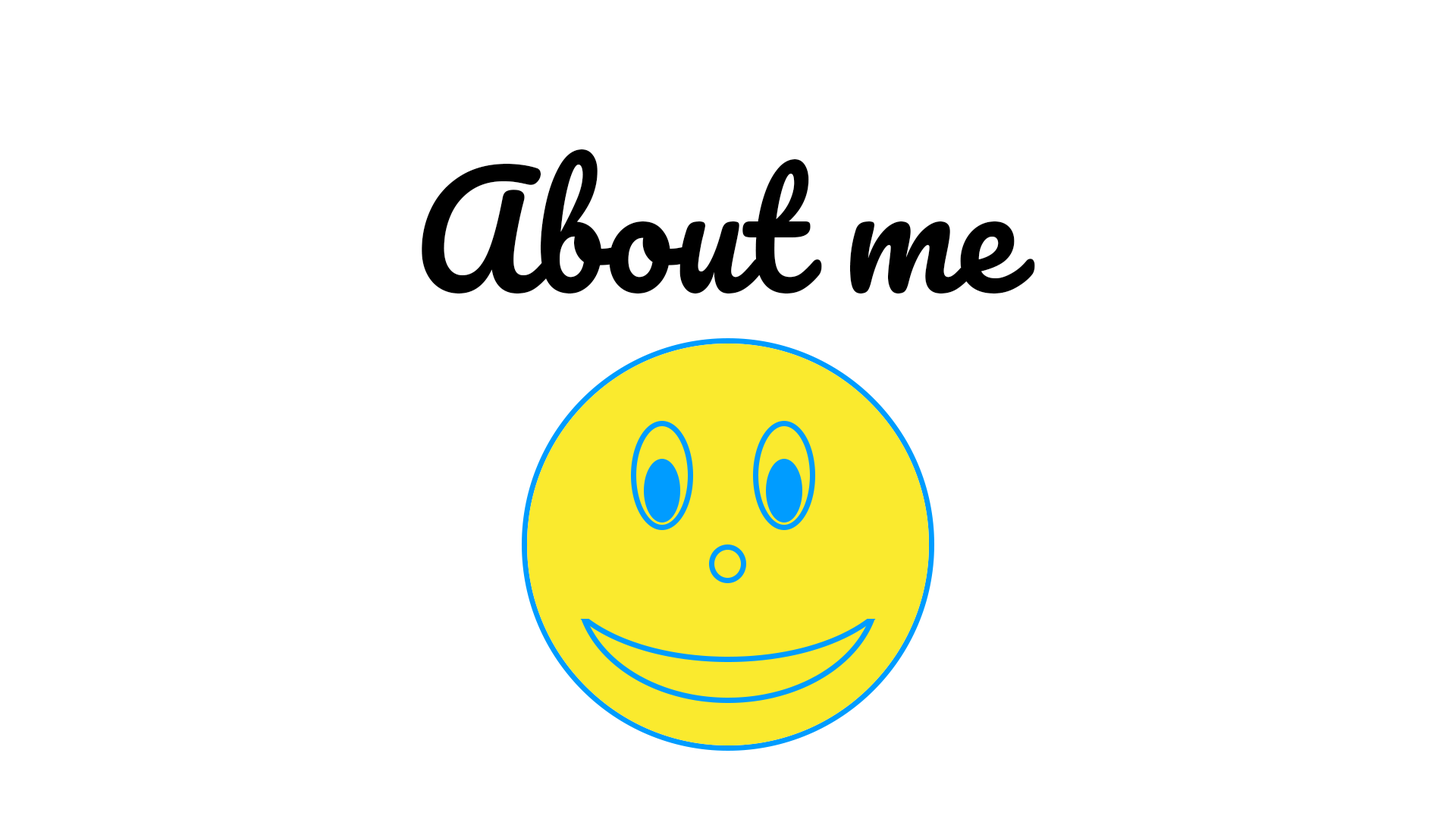
<style>
.page{position:relative;width:1456px;height:819px;background:#ffffff}
.page>*{position:absolute;margin:0}
.t1{font:151.7px "Pacifico-Regular";color:#000000}
</style>
<div class="page">
<p class="t1" style="left:422px;top:149px;width:613px;height:144px">About me</p>
</div>
